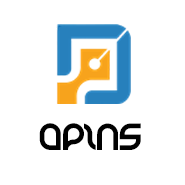
<style>
.page{position:relative;width:185px;height:185px;background:#ffffff}
.page>*{position:absolute;margin:0}
.t1{font:30px "JeckleRegular";color:#010101}
</style>
<div class="page">
<p class="t1" style="left:39px;top:123px;width:102px;height:27px">APINS</p>
</div>
